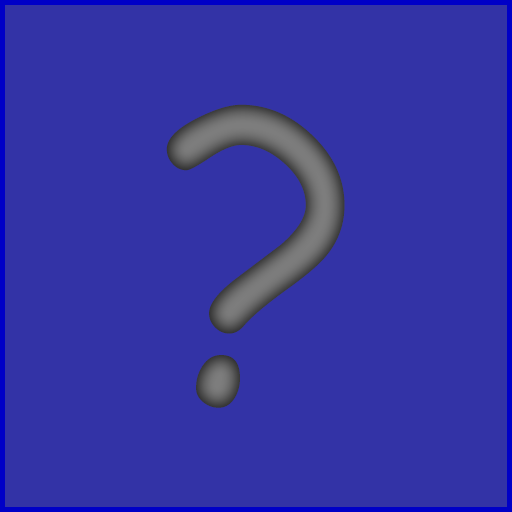
<style>
.page{position:relative;width:512px;height:512px;background:#3333a6}
.page>*{position:absolute;margin:0}
.t1{font:400px "ComicSansMS"}
</style>
<div class="page">
<p class="t1" style="left:166px;top:104px;width:179px;height:304px">?</p>
</div>
